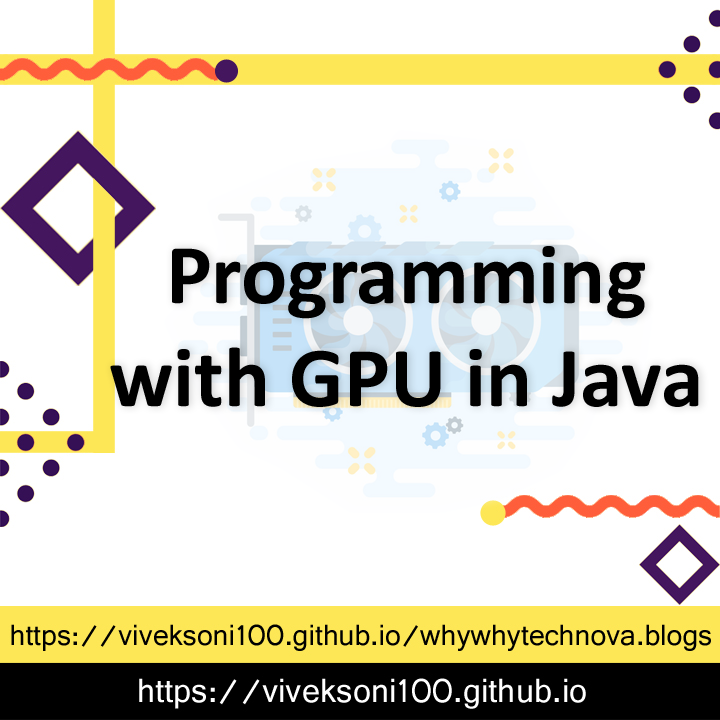
<style>
.page{position:relative;width:720px;height:720px;background:#ffffff}
.page>*{position:absolute;margin:0}
.t1{font:85.9px "Calibri-Bold";color:#000000}
</style>
<div class="page">
<p class="t1" style="left:110px;top:246px;width:589px;height:161px;text-align:center">Programming <br>with GPU in Java</p>
</div>
